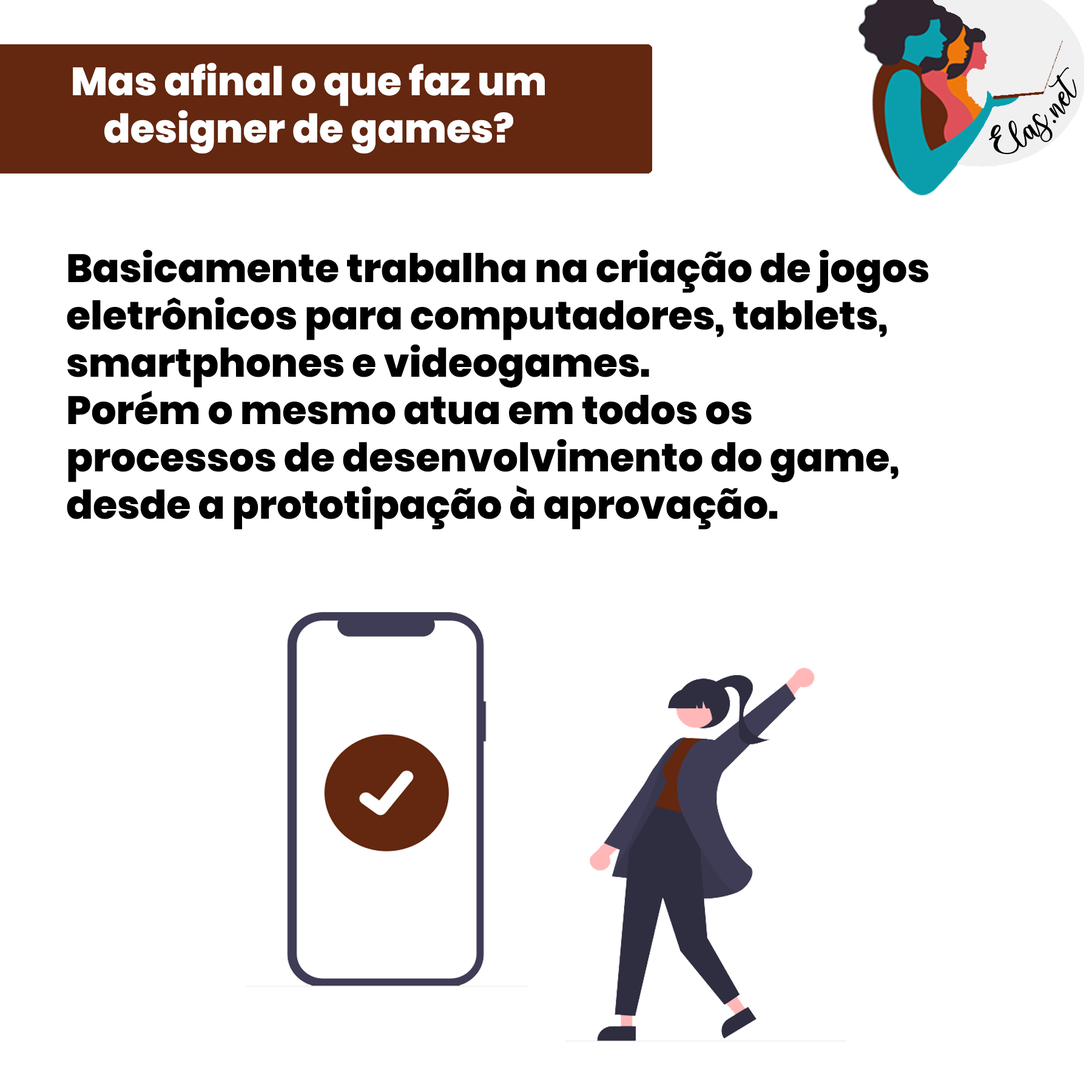
<style>
.page{position:relative;width:1092px;height:1092px;background:#ffffff}
.page>*{position:absolute;margin:0}
.t1{font:39.4px "Poppins-ExtraBold";color:#ffffff}
.t2{font:25px "charlinda-Regular";color:#000000;scale:1.18 1}
.t3{font:39.4px "Poppins-ExtraBold";color:#000000}
</style>
<div class="page">
<p class="t1" style="left:73px;top:62px;width:472px;height:91px;text-align:center">Mas afinal o que faz um designer de games?</p>
<p class="t2" style="left:989px;top:67px;width:88px;height:87px;rotate:-42deg">Elas.net</p>
<p class="t3" style="left:67px;top:249px;width:862px;height:281px">Basicamente trabalha na criação de jogos eletrônicos para computadores, tablets, smartphones e videogames. <br>Porém o mesmo atua em todos os processos de desenvolvimento do game, desde a prototipação à aprovação.</p>
</div>
